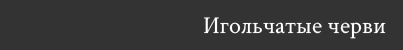
<style>
.page{position:relative;width:403px;height:50px;background:#333333}
.page>*{position:absolute;margin:0}
.t1{font:24px "CrimsonText-Regular";color:#ffffff}
</style>
<div class="page">
<p class="t1" style="left:204px;top:17px;width:182px;height:22px">Игольчатые черви</p>
</div>
